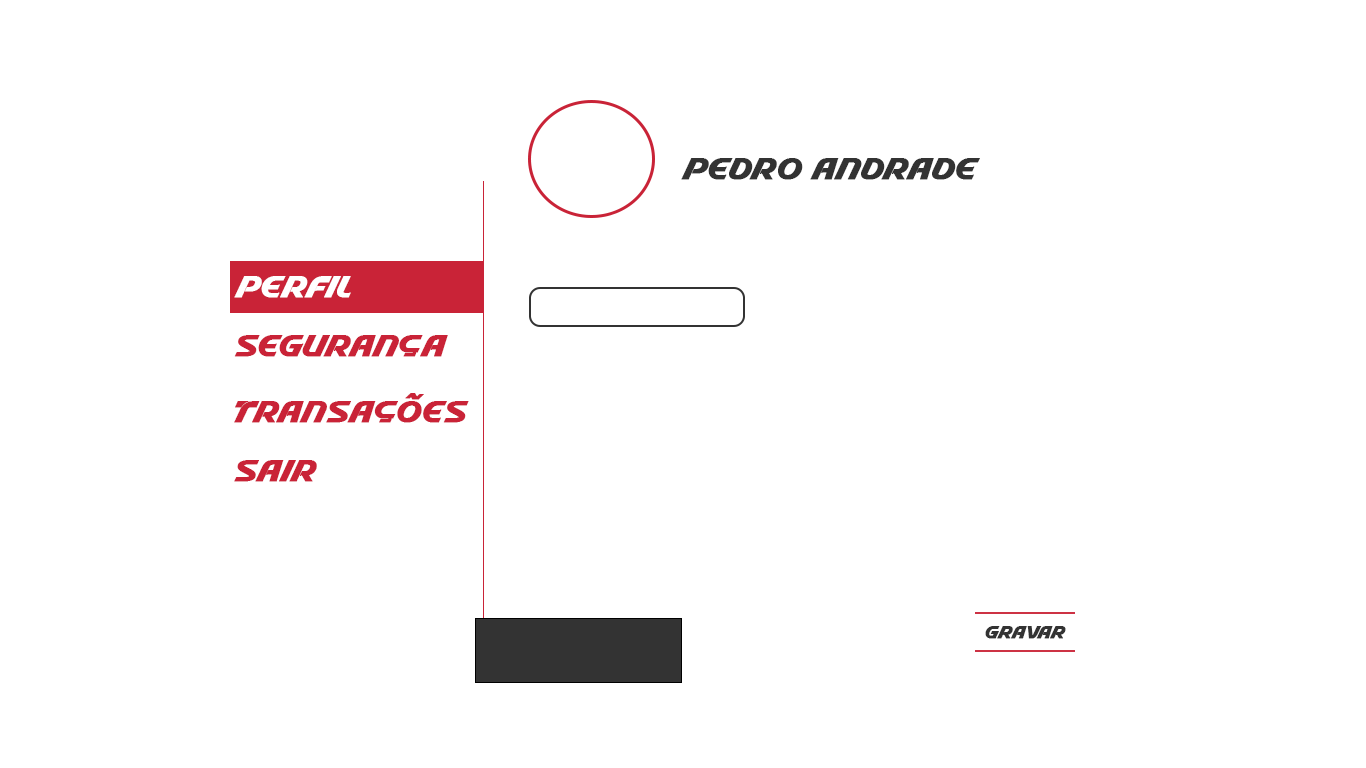
<style>
.page{position:relative;width:1366px;height:768px;background:#ffffff}
.page>*{position:absolute;margin:0}
.t1{font:30px "Stable";color:#333333;font-weight:bold}
.t2{font:30px "Stable";color:#ffffff;font-weight:bold}
.t3{font:30px "Stable";color:#c92337;font-weight:bold}
.t4{font:17px "Stable";color:#333333;font-weight:bold}
</style>
<div class="page">
<p class="t1" style="left:681px;top:158px;width:299px;height:22px">Pedro Andrade</p>
<p class="t2" style="left:234px;top:276px;width:117px;height:22px">Perfil</p>
<p class="t3" style="left:234px;top:335px;width:214px;height:22px">Segurança</p>
<p class="t3" style="left:234px;top:393px;width:235px;height:30px">Transações</p>
<p class="t3" style="left:234px;top:460px;width:83px;height:22px">Sair</p>
<p class="t4" style="left:985px;top:626px;width:81px;height:13px">Gravar</p>
</div>
